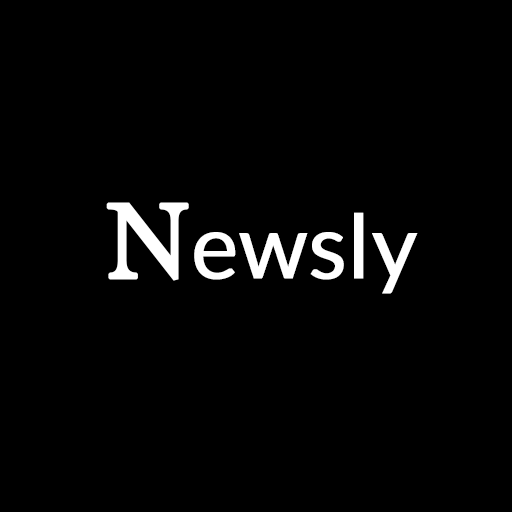
<style>
.page{position:relative;width:512px;height:512px;background:#000000}
.page>*{position:absolute;margin:0}
.t1{font:88.6px "Lato-Regular";color:#ffffff;font-weight:bold}
.t2{font:110.8px "Marion-Regular";color:#ffffff;font-weight:bold}
</style>
<div class="page">
<p class="t1" style="left:106px;top:202px;width:312px;height:92px"><span class="t2">N</span>ewsly</p>
</div>
